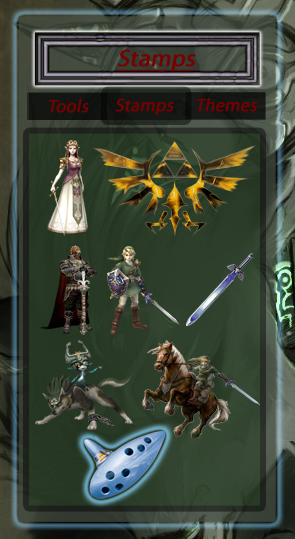
<style>
.page{position:relative;width:295px;height:539px}
.page>*{position:absolute;margin:0}
.t1{font:23.9px "MyriadPro-Regular";color:#790000;font-weight:bold;font-style:italic;text-decoration:underline}
.t2{font:17.9px "MyriadPro-Regular";color:#790000;font-weight:bold;font-style:italic}
</style>
<div class="page">
<p class="t1" style="left:116px;top:49px;width:80px;height:22px">Stamps</p>
<p class="t2" style="left:49px;top:99px;width:40px;height:14px">Tools</p>
<p class="t2" style="left:115px;top:98px;width:59px;height:17px">Stamps</p>
<p class="t2" style="left:197px;top:98px;width:61px;height:14px">Themes</p>
</div>
